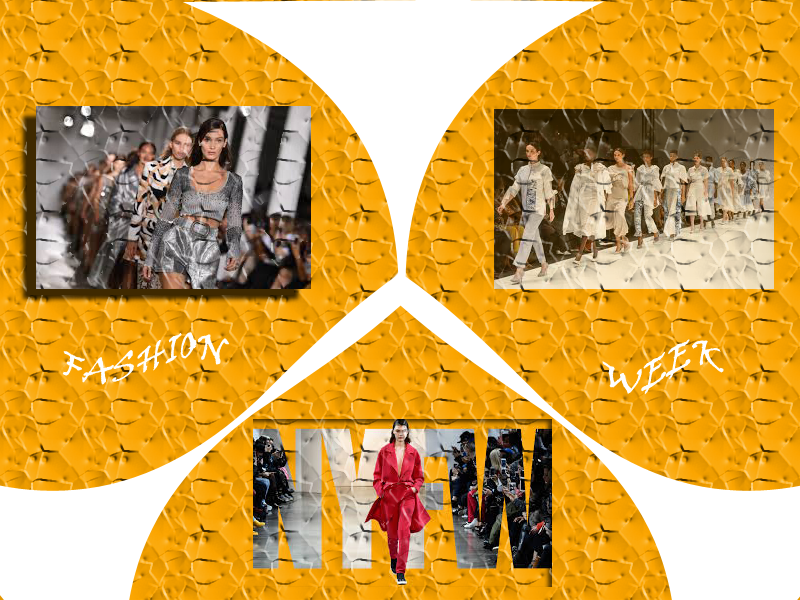
<style>
.page{position:relative;width:800px;height:600px}
.page>*{position:absolute;margin:0}
.t1{font:36px "VinerHandITC";color:#fefefe}
</style>
<div class="page">
<p class="t1" style="left:62px;top:332px;width:168px;height:53px">FASHION</p>
<p class="t1" style="left:602px;top:339px;width:122px;height:56px">WEEK</p>
</div>
